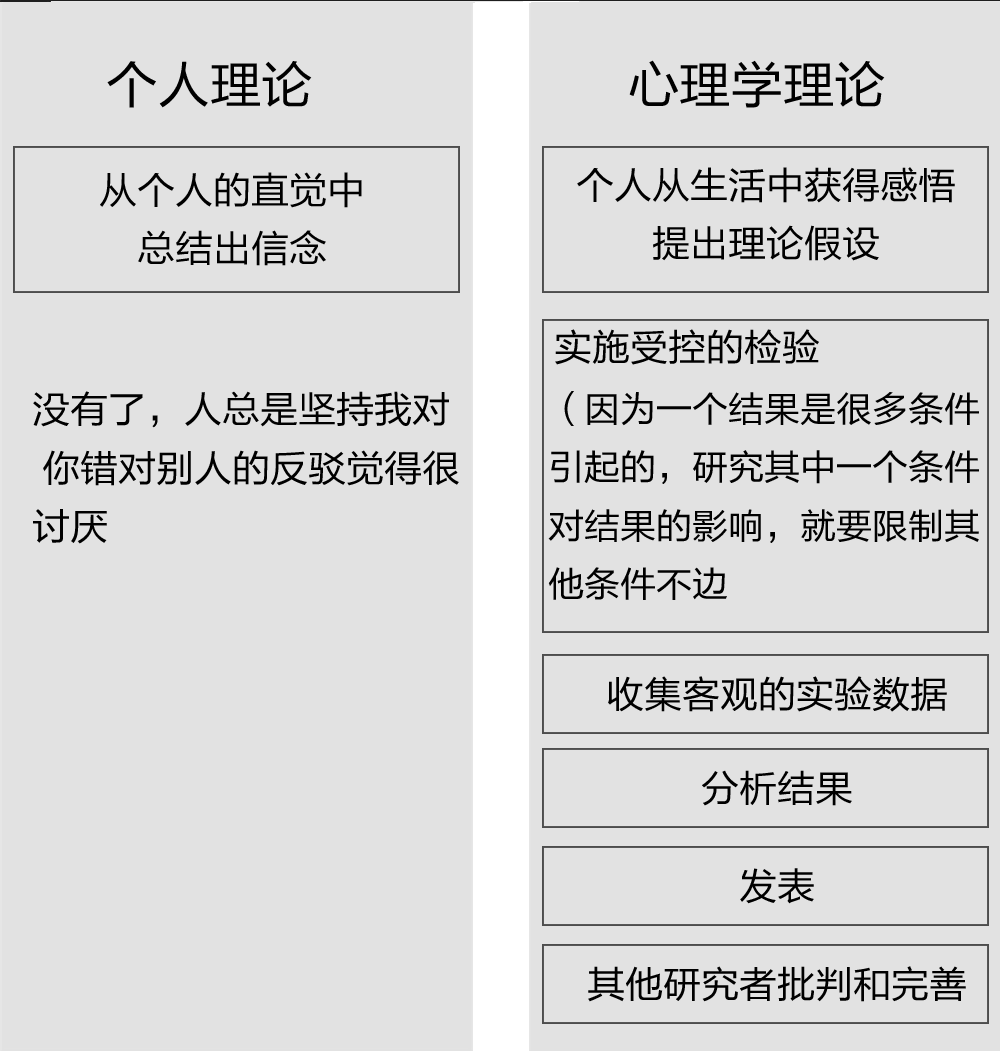
<style>
.page{position:relative;width:1000px;height:1051px;background:#e2e2e2}
.page>*{position:absolute;margin:0}
.t1{font:50.6px "FZLTHK--GBK1-0";color:#000000}
.t2{font:37.3px/58.5px "FZLTHK--GBK1-0"}
.t3{font:37.3px "FZLTHK--GBK1-0"}
.t4{font:35.3px/58.5px "FZLTHK--GBK1-0"}
</style>
<div class="page">
<p class="t1" style="left:106px;top:59px;width:778px;height:48px">个人理论                      心理学理论</p>
<p class="t2" style="left:99px;top:171px;width:262px;height:94px;text-align:center">从个人的直觉中<br>总结出信念</p>
<p class="t2" style="left:576px;top:166px;width:378px;height:94px;text-align:center">个人从生活中获得感悟<br>提出理论假设</p>
<p class="t3" style="left:554px;top:328px;width:264px;height:36px">实施受控的检验</p>
<p class="t2" style="left:32px;top:390px;width:426px;height:153px">没有了，人总是坚持我对<br> 你错对别人的反驳觉得很<br>讨厌</p>
<p class="t4" style="left:547px;top:390px;width:431px;height:209px">（因为一个结果是很多条件<br>引起的，研究其中一个条件<br>对结果的影响，就要限制其<br>他条件不边</p>
<p class="t3" style="left:607px;top:675px;width:339px;height:36px">收集客观的实验数据</p>
<p class="t3" style="left:701px;top:769px;width:150px;height:36px">分析结果</p>
<p class="t3" style="left:739px;top:867px;width:74px;height:36px">发表</p>
<p class="t3" style="left:587px;top:965px;width:378px;height:36px">其他研究者批判和完善</p>
</div>
